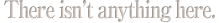
<style>
.page{position:relative;width:219px;height:23px;background:#ffffff}
.page>*{position:absolute;margin:0}
.t1{font:24px "RyuminPro-ExBold";letter-spacing:-0.08em;color:#beb5ad;scale:0.85 1}
</style>
<div class="page">
<p class="t1" style="left:4px;top:0px;width:211px;height:22px">There isn’t anything here.</p>
</div>
